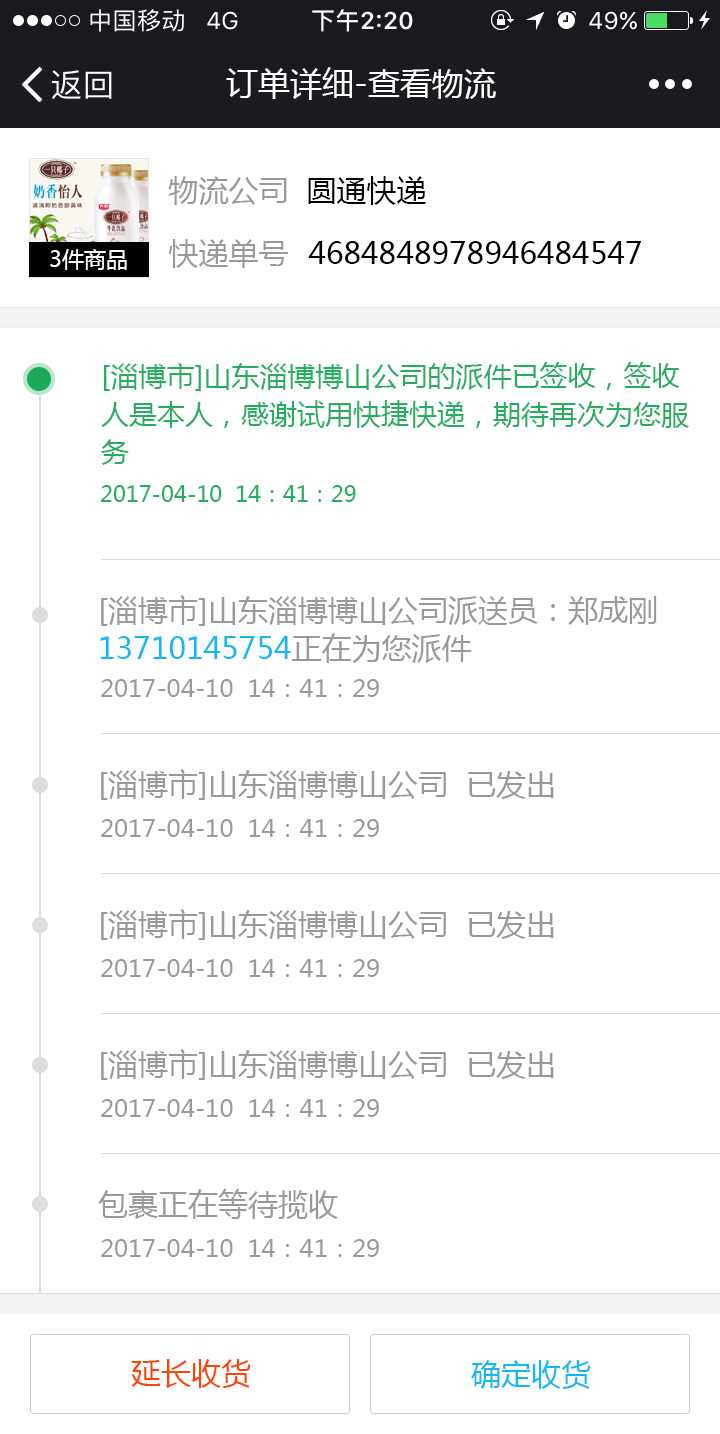
<style>
.page{position:relative;width:720px;height:1434px;background:#ffffff}
.page>*{position:absolute;margin:0}
.t1{font:32px "MicrosoftYaHei";color:#ffffff}
.t2{font:30px "MicrosoftYaHei";color:#999999}
.t3{font:30px "MicrosoftYaHei";color:#000000}
.t4{font:22px "MicrosoftYaHei";color:#ffffff}
.t5{font:28px/38px "MicrosoftYaHei";color:#25ae5f}
.t6{font:22px "MicrosoftYaHei";color:#25ae5f}
.t7{font:30px/38px "MicrosoftYaHei";color:#999999}
.t8{font:30px/38px "MicrosoftYaHei";color:#12b7f5}
.t9{font:24px "MicrosoftYaHei";color:#999999}
.t10{font:30px "MicrosoftYaHei";color:#ff4400}
.t11{font:30px "MicrosoftYaHei";color:#12b7f5}
</style>
<div class="page">
<p class="t1" style="left:226px;top:67px;width:270px;height:33px">订单详细-查看物流</p>
<p class="t2" style="left:168px;top:176px;width:119px;height:29px">物流公司</p>
<p class="t3" style="left:308px;top:176px;width:118px;height:29px">圆通快递</p>
<p class="t2" style="left:168px;top:239px;width:120px;height:29px">快递单号</p>
<p class="t3" style="left:308px;top:241px;width:334px;height:23px">4684848978946484547</p>
<p class="t4" style="left:50px;top:249px;width:77px;height:21px">3件商品</p>
<p class="t5" style="left:101px;top:362px;width:588px;height:103px">[淄博市]山东淄博博山公司的派件已签收，签收<br>人是本人，感谢试用快捷快递，期待再次为您服<br>务</p>
<p class="t6" style="left:101px;top:485px;width:255px;height:17px">2017-04-10  14：41：29</p>
<p class="t7" style="left:100px;top:595px;width:557px;height:68px">[淄博市]山东淄博博山公司派送员：郑成刚<br><span class="t8">13710145754</span>正在为您派件</p>
<p class="t9" style="left:101px;top:679px;width:278px;height:18px">2017-04-10  14：41：29</p>
<p class="t2" style="left:101px;top:769px;width:453px;height:31px">[淄博市]山东淄博博山公司  已发出</p>
<p class="t9" style="left:101px;top:819px;width:278px;height:18px">2017-04-10  14：41：29</p>
<p class="t2" style="left:101px;top:909px;width:453px;height:31px">[淄博市]山东淄博博山公司  已发出</p>
<p class="t9" style="left:101px;top:959px;width:278px;height:18px">2017-04-10  14：41：29</p>
<p class="t2" style="left:101px;top:1049px;width:453px;height:31px">[淄博市]山东淄博博山公司  已发出</p>
<p class="t9" style="left:101px;top:1099px;width:278px;height:18px">2017-04-10  14：41：29</p>
<p class="t2" style="left:98px;top:1189px;width:240px;height:30px">包裹正在等待揽收</p>
<p class="t9" style="left:101px;top:1239px;width:278px;height:18px">2017-04-10  14：41：29</p>
<p class="t10" style="left:131px;top:1359px;width:120px;height:29px">延长收货</p>
<p class="t11" style="left:471px;top:1360px;width:120px;height:29px">确定收货</p>
</div>
